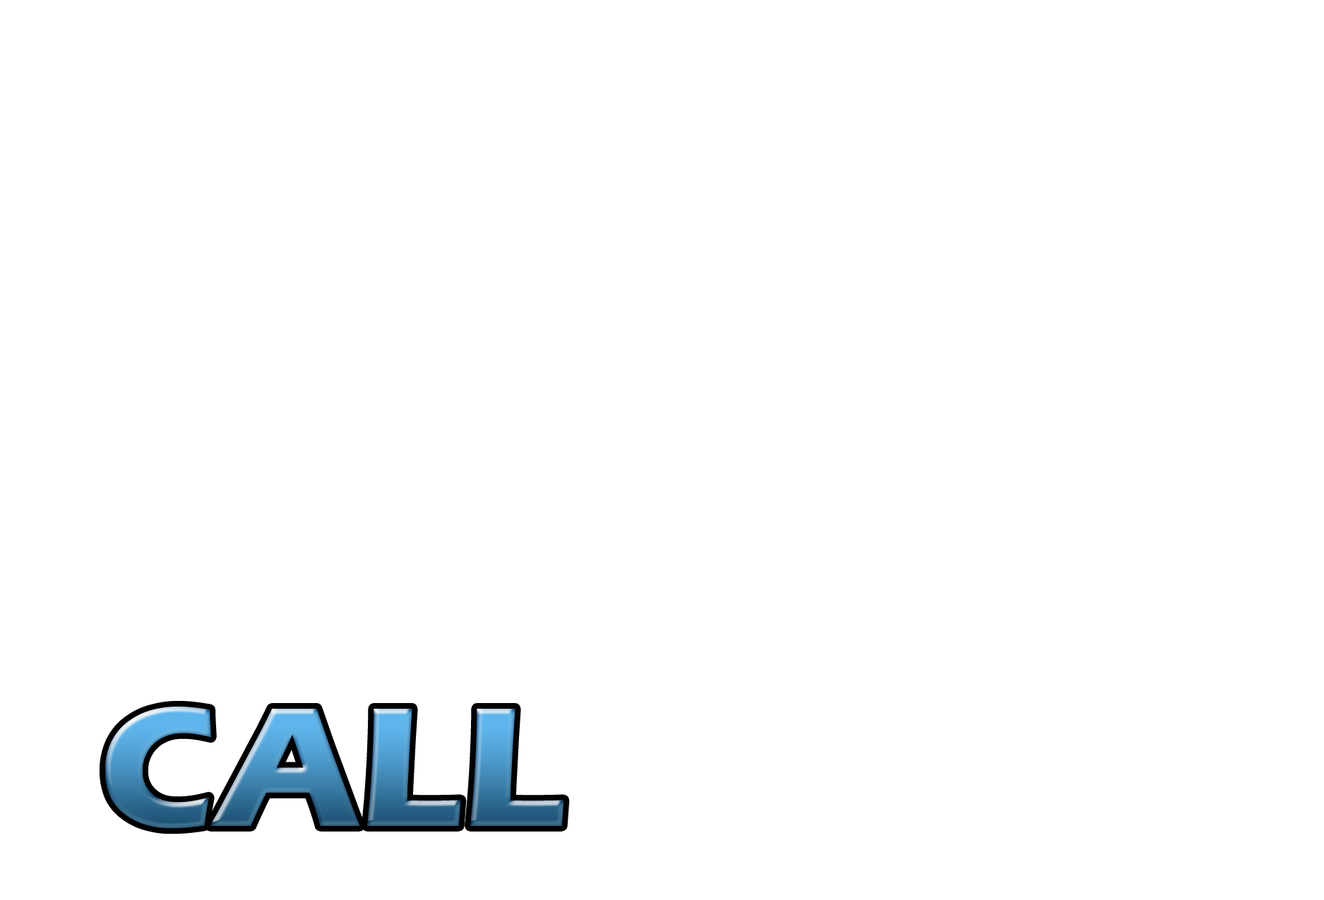
<style>
.page{position:relative;width:1324px;height:900px;background:#ffffff}
.page>*{position:absolute;margin:0}
.t1{font:175.9px "ErasITC-Bold"}
</style>
<div class="page">
<p class="t1" style="left:105px;top:706px;width:459px;height:123px">CALL</p>
</div>
